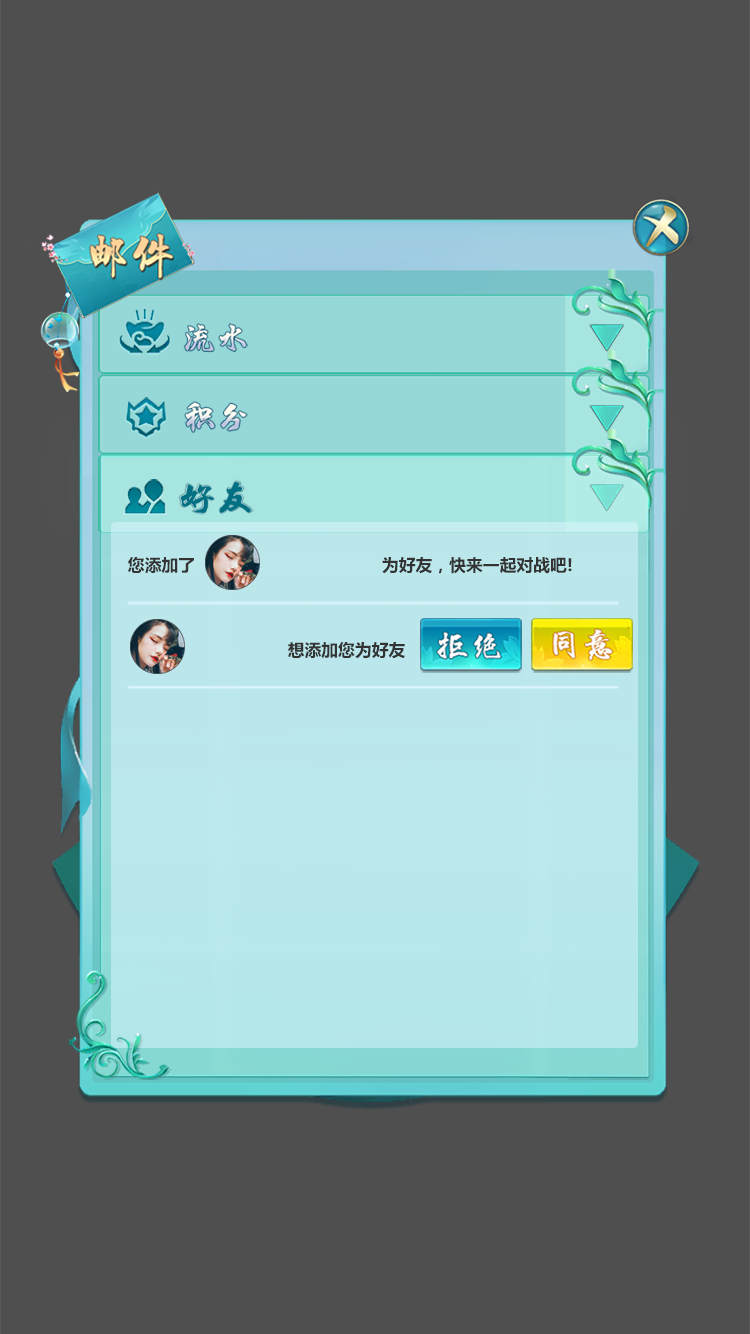
<style>
.page{position:relative;width:750px;height:1334px;background:#4f4f4f}
.page>*{position:absolute;margin:0}
.t1{font:16.8px "MicrosoftYaHei-Bold";color:#333333}
</style>
<div class="page">
<p class="t1" style="left:128px;top:557px;width:66px;height:17px">您添加了</p>
<p class="t1" style="left:382px;top:557px;width:190px;height:17px">为好友，快来一起对战吧!</p>
<p class="t1" style="left:288px;top:642px;width:117px;height:17px">想添加您为好友</p>
</div>
